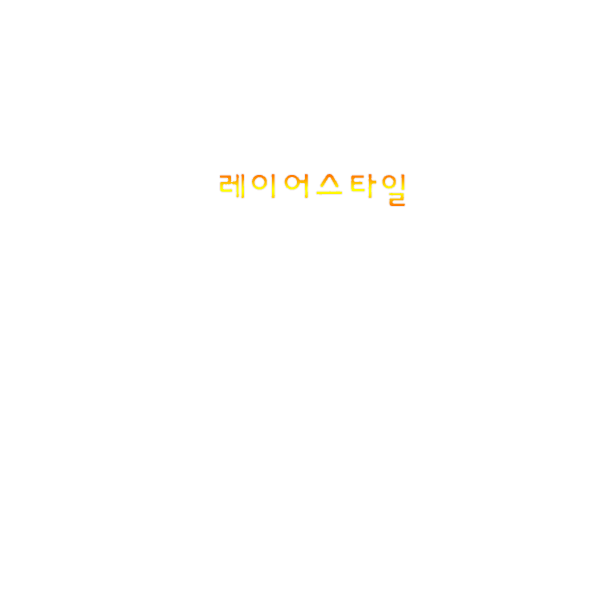
<style>
.page{position:relative;width:600px;height:600px;background:#ffffff}
.page>*{position:absolute;margin:0}
.t1{font:36px "HaanBaekjeB";letter-spacing:0.05em;text-transform:uppercase}
</style>
<div class="page">
<p class="t1" style="left:219px;top:173px;width:187px;height:34px">레이어스타일</p>
</div>
